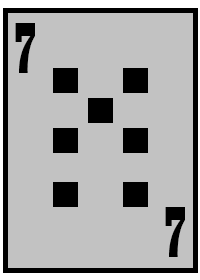
<style>
.page{position:relative;width:200px;height:280px;background:#c2c2c2}
.page>*{position:absolute;margin:0}
.t1{font:75px "Playbill";color:#000000}
</style>
<div class="page">
<p class="t1" style="left:15px;top:23px;width:20px;height:50px">7</p>
<p class="t1" style="left:165px;top:207px;width:20px;height:50px">7</p>
</div>
